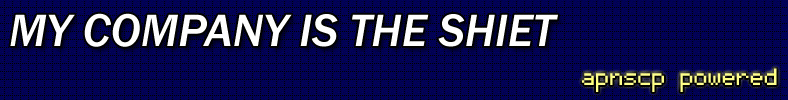
<style>
.page{position:relative;width:788px;height:100px;background:#000055}
.page>*{position:absolute;margin:0}
.t1{font:47px "FranklinGothic-MediumItalic";color:#ffffff}
.t2{font:30px "Sheldon Narrow";color:#ffff8e}
</style>
<div class="page">
<p class="t1" style="left:10px;top:13px;width:548px;height:34px">MY COMPANY IS THE SHIET</p>
<p class="t2" style="left:582px;top:68px;width:195px;height:24px">apnscp powered</p>
</div>
